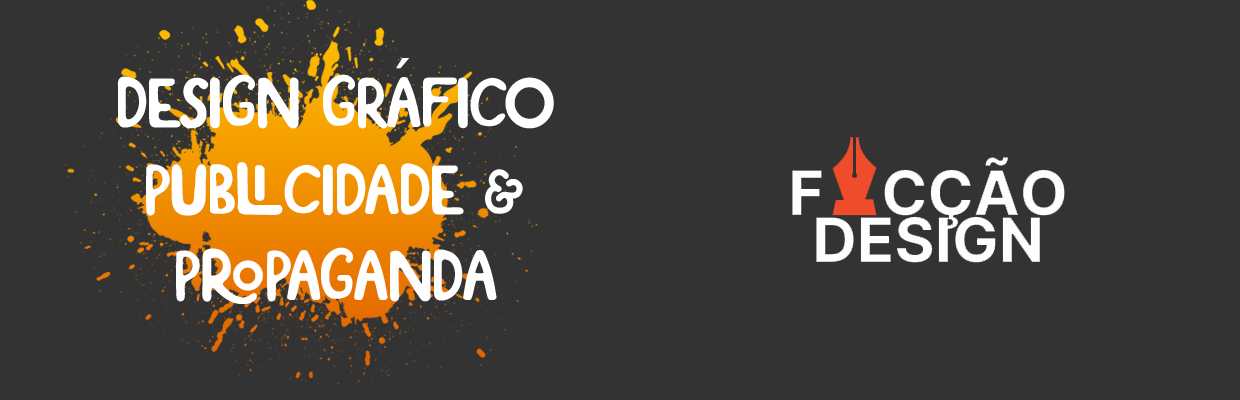
<style>
.page{position:relative;width:1240px;height:400px;background:#333333}
.page>*{position:absolute;margin:0}
.t1{font:72px "MyriadPro-Regular";color:#ffffff}
.t2{font:72px "SirukotaRegular";color:#ffffff}
</style>
<div class="page">
<p class="t1" style="left:396px;top:58px;width:14px;height:11px">´</p>
<p class="t2" style="left:117px;top:74px;width:437px;height:230px;text-align:center">Design GrAfICO<br>publicidade &amp;<br>Propaganda</p>
</div>
